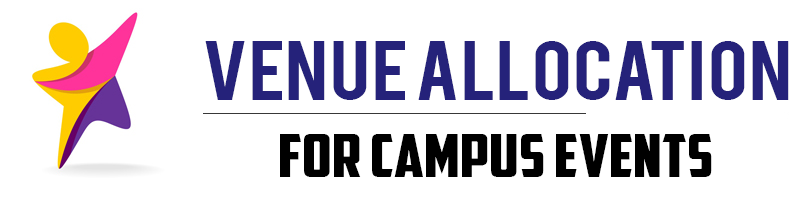
<style>
.page{position:relative;width:803px;height:200px;background:#ffffff}
.page>*{position:absolute;margin:0}
.t1{font:65.6px "Bebas";color:#25227a;scale:1.17 1}
.t2{font:59.4px "AmericanCaptain";color:#000000;scale:1.15 1}
</style>
<div class="page">
<p class="t1" style="left:205px;top:41px;width:584px;height:59px">VENUE ALLOCATION</p>
<p class="t2" style="left:280px;top:134px;width:432px;height:43px">For CAMPUS EVENTS</p>
</div>
